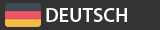
<style>
.page{position:relative;width:160px;height:30px;background:#333333}
.page>*{position:absolute;margin:0}
.t1{font:20.2px "MyriadPro-Semibold";color:#ffffff;text-transform:uppercase}
</style>
<div class="page">
<p class="t1" style="left:46px;top:8px;width:81px;height:14px">Deutsch</p>
</div>
